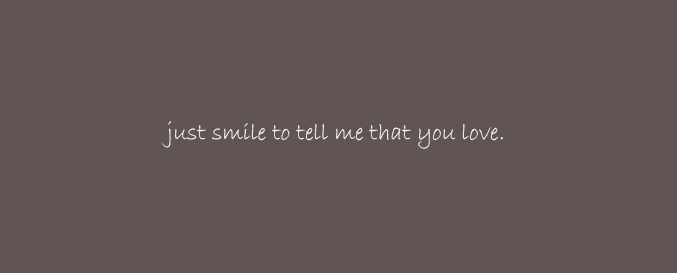
<style>
.page{position:relative;width:677px;height:273px;background:#615454}
.page>*{position:absolute;margin:0}
.t1{font:24px "BradleyHandITC";color:#fbf5f5}
</style>
<div class="page">
<p class="t1" style="left:162px;top:121px;width:341px;height:28px">just smile to tell me that you love.</p>
</div>
